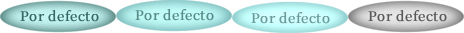
<style>
.page{position:relative;width:464px;height:33px;background:#ffffff}
.page>*{position:absolute;margin:0}
.t1{font:16px "OfficialFateFont-Medium";color:#376866;font-weight:bold}
.t2{font:16px "OfficialFateFont-Medium";color:#598a88;font-weight:bold}
.t3{font:16px "OfficialFateFont-Medium";color:#6a9b99;font-weight:bold}
.t4{font:16px "OfficialFateFont-Medium";color:#595959;font-weight:bold}
</style>
<div class="page">
<p class="t1" style="left:20px;top:10px;width:79px;height:12px">Por defecto</p>
<p class="t2" style="left:135px;top:9px;width:79px;height:12px">Por defecto</p>
<p class="t3" style="left:251px;top:12px;width:79px;height:12px">Por defecto</p>
<p class="t4" style="left:368px;top:10px;width:79px;height:12px">Por defecto</p>
</div>
